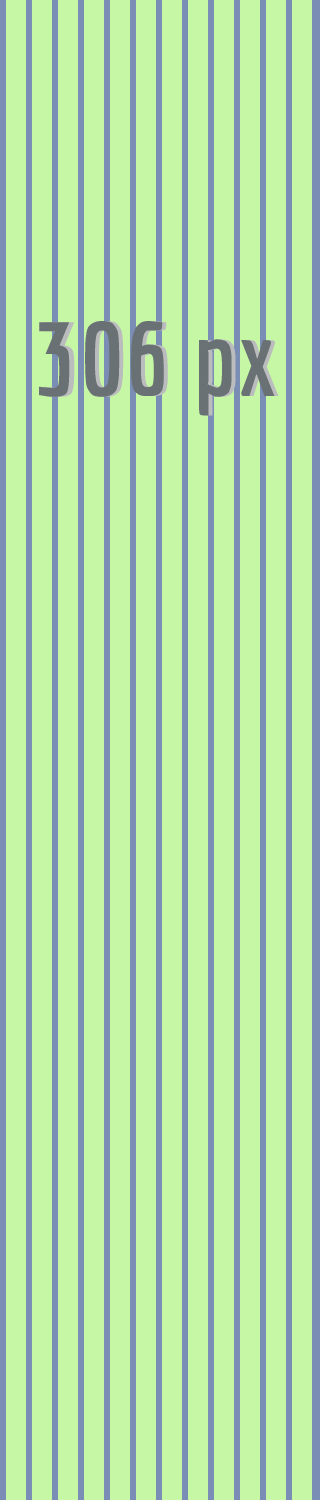
<style>
.page{position:relative;width:320px;height:1500px;background:#c6f7a5}
.page>*{position:absolute;margin:0}
.t1{font:103.6px "Economica-Bold";letter-spacing:0.03em;color:#6a7174}
.t2{font:103.6px "Economica-Bold";letter-spacing:0.03em}
</style>
<div class="page">
<p class="t1" style="left:39px;top:321px;width:236px;height:95px">306 px</p>
<p class="t2" style="left:44px;top:321px;width:235px;height:95px">306 px</p>
</div>
